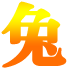
<style>
.page{position:relative;width:68px;height:68px;background:#ffffff}
.page>*{position:absolute;margin:0}
.t1{font:68px "DFPSongW9";font-weight:bold}
</style>
<div class="page">
<p class="t1" style="left:1px;top:1px;width:66px;height:67px">兔</p>
</div>
